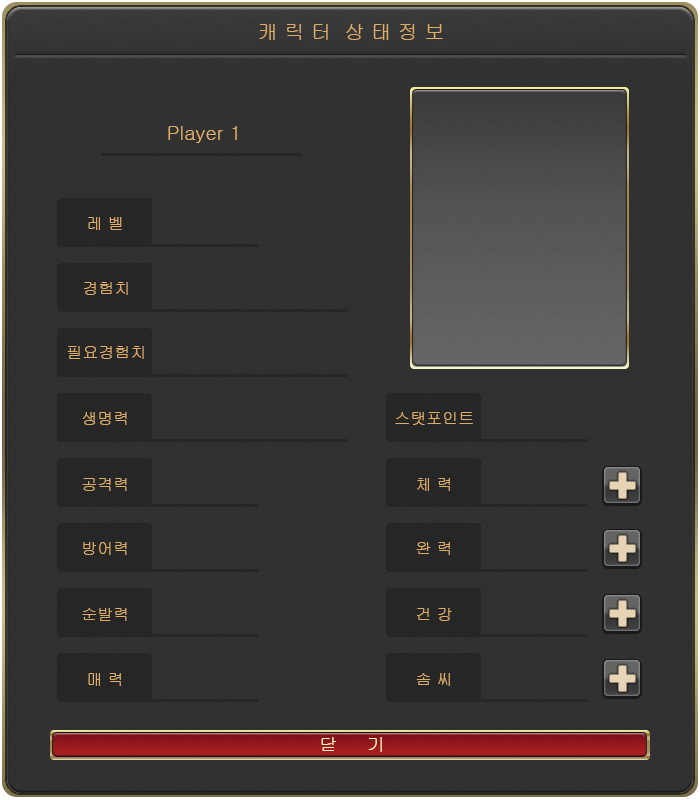
<style>
.page{position:relative;width:700px;height:800px;background:#313031}
.page>*{position:absolute;margin:0}
.t1{font:20px "Gulim";color:#dcad69}
.t2{font:16px "Gulim";color:#dcad69}
.t3{font:18px "Gulim";color:#f7f7bd}
</style>
<div class="page">
<p class="t1" style="left:259px;top:24px;width:184px;height:16px">캐 릭 터  상 태 정 보</p>
<p class="t1" style="left:168px;top:126px;width:69px;height:17px">Player 1</p>
<p class="t2" style="left:88px;top:217px;width:34px;height:13px">레 벨</p>
<p class="t2" style="left:84px;top:282px;width:44px;height:13px">경험치</p>
<p class="t2" style="left:67px;top:346px;width:77px;height:13px">필요경험치</p>
<p class="t2" style="left:82px;top:412px;width:45px;height:13px">생명력</p>
<p class="t2" style="left:395px;top:412px;width:78px;height:13px">스탯포인트</p>
<p class="t2" style="left:82px;top:478px;width:45px;height:13px">공격력</p>
<p class="t2" style="left:417px;top:478px;width:33px;height:13px">체 력</p>
<p class="t2" style="left:83px;top:542px;width:44px;height:13px">방어력</p>
<p class="t2" style="left:416px;top:542px;width:34px;height:13px">완 력</p>
<p class="t2" style="left:82px;top:608px;width:45px;height:13px">순발력</p>
<p class="t2" style="left:417px;top:608px;width:35px;height:13px">건 강</p>
<p class="t2" style="left:88px;top:673px;width:33px;height:13px">매 력</p>
<p class="t2" style="left:416px;top:673px;width:34px;height:13px">솜 씨</p>
<p class="t3" style="left:321px;top:737px;width:61px;height:15px">닫     기</p>
</div>
